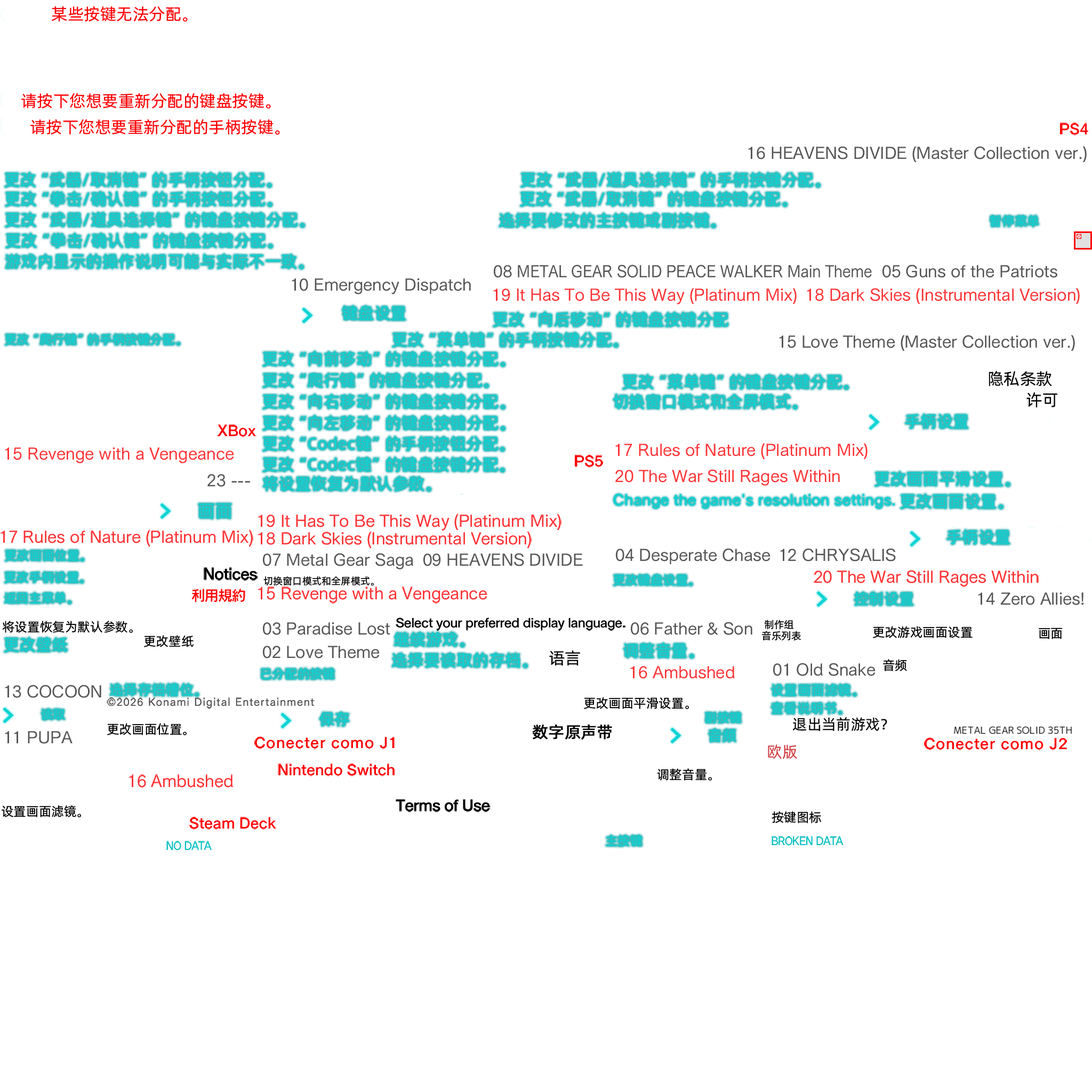
<style>
.page{position:relative;width:1092px;height:1092px;background:#ffffff}
.page>*{position:absolute;margin:0}
.t1{font:16.5px "AlibabaPuHuiTi_3_55_Regular";color:#ff0004}
.t2{font:16.5px "AlibabaPuHuiTi_3_55_Regular";color:#0cd3d4}
.t3{font:16.5px "AlibabaPuHuiTi_3_55_Regular";color:#0cd1ce}
.t4{font:12.8px "AlibabaPuHuiTi_3_55_Regular";color:#0cd3d4}
.t5{font:16.5px "AlibabaPuHuiTi_3_55_Regular";color:#000000}
.t6{font:18.2px "AlibabaPuHuiTi_3_55_Regular";color:#0cd3d4}
.t7{font:9.9px "AlibabaPuHuiTi_3_55_Regular";color:#000000}
.t8{font:15.4px "AlibabaPuHuiTi_3_55_Regular";color:#0cd3d4}
.t9{font:12.8px "AlibabaPuHuiTi_3_55_Regular";color:#000000}
.t10{font:10.2px "AlibabaPuHuiTi_3_55_Regular";color:#000000}
.t11{font:14.3px "AlibabaPuHuiTi_3_55_Regular";color:#0cd3d4}
.t12{font:13.7px "AlibabaPuHuiTi_3_55_Regular";color:#0cd3d4}
.t13{font:13.5px "AlibabaPuHuiTi_3_55_Regular";color:#0cd3d4}
.t14{font:16px "AlibabaPuHuiTi_3_55_Regular";color:#0cd3d4}
.t15{font:16px "AlibabaPuHuiTi_3_55_Regular";color:#000000;font-weight:bold}
.t16{font:14.8px "AlibabaPuHuiTi_3_55_Regular";color:#000000}
.t17{font:15px "AlibabaPuHuiTi_3_55_Regular";color:#0cd3d4}
.t18{font:15.6px "AlibabaPuHuiTi_3_55_Regular";color:#cf3c40}
</style>
<div class="page">
<p class="t1" style="left:52px;top:6px;width:136px;height:16px">某些按键无法分配。</p>
<p class="t1" style="left:21px;top:93px;width:250px;height:16px">请按下您想要重新分配的键盘按键。</p>
<p class="t1" style="left:30px;top:119px;width:250px;height:16px">请按下您想要重新分配的手柄按键。</p>
<p class="t2" style="left:4px;top:172px;width:268px;height:16px">更改“武器/取消键”的手柄按钮分配。</p>
<p class="t2" style="left:520px;top:172px;width:301px;height:16px">更改“武器/道具选择键”的手柄按键分配。</p>
<p class="t2" style="left:5px;top:191px;width:267px;height:16px">更改“拳击/确认键”的手柄按钮分配。</p>
<p class="t2" style="left:520px;top:191px;width:268px;height:16px">更改“武器/取消键”的键盘按键分配。</p>
<p class="t3" style="left:5px;top:212px;width:300px;height:16px">更改“武器/道具选择键”的键盘按键分配。</p>
<p class="t2" style="left:499px;top:212px;width:217px;height:16px">选择要修改的主按键或副按键。</p>
<p class="t4" style="left:990px;top:215px;width:49px;height:12px">暂停菜单</p>
<p class="t2" style="left:5px;top:232px;width:268px;height:16px">更改“拳击/确认键”的键盘按键分配。</p>
<p class="t2" style="left:5px;top:253px;width:299px;height:16px">游戏内显示的操作说明可能与实际不一致。</p>
<p class="t2" style="left:342px;top:305px;width:64px;height:16px">键盘设置</p>
<p class="t2" style="left:493px;top:311px;width:235px;height:16px">更改“向后移动”的键盘按键分配</p>
<p class="t4" style="left:5px;top:333px;width:175px;height:13px">更改“爬行键”的手柄按键分配。</p>
<p class="t2" style="left:392px;top:332px;width:227px;height:16px">更改“菜单键”的手柄按键分配。</p>
<p class="t2" style="left:262px;top:351px;width:243px;height:16px">更改“向前移动”的键盘按键分配。</p>
<p class="t2" style="left:262px;top:372px;width:227px;height:16px">更改“爬行键”的键盘按键分配。</p>
<p class="t2" style="left:622px;top:374px;width:227px;height:16px">更改“菜单键”的键盘按键分配。</p>
<p class="t5" style="left:989px;top:371px;width:63px;height:16px">隐私条款</p>
<p class="t2" style="left:262px;top:393px;width:243px;height:16px">更改“向右移动”的键盘按键分配。</p>
<p class="t2" style="left:613px;top:394px;width:185px;height:15px">切换窗口模式和全屏模式。</p>
<p class="t5" style="left:1026px;top:392px;width:31px;height:16px">许可</p>
<p class="t2" style="left:905px;top:414px;width:64px;height:15px">手柄设置</p>
<p class="t2" style="left:262px;top:415px;width:243px;height:16px">更改“向左移动”的键盘按键分配。</p>
<p class="t2" style="left:262px;top:436px;width:243px;height:16px">更改“Codec键”的手柄按钮分配。</p>
<p class="t2" style="left:262px;top:456px;width:243px;height:16px">更改“Codec键”的键盘按键分配。</p>
<p class="t2" style="left:874px;top:471px;width:136px;height:16px">更改画面平滑设置。</p>
<p class="t2" style="left:263px;top:476px;width:168px;height:16px">将设置恢复为默认参数。</p>
<p class="t2" style="left:900px;top:493px;width:103px;height:16px">更改画面设置。</p>
<p class="t6" style="left:198px;top:503px;width:34px;height:16px">画面</p>
<p class="t2" style="left:946px;top:529px;width:64px;height:16px">手柄设置</p>
<p class="t4" style="left:5px;top:549px;width:79px;height:12px">更改画面位置。</p>
<p class="t4" style="left:4px;top:571px;width:80px;height:12px">更改手柄设置。</p>
<p class="t7" style="left:263px;top:576px;width:111px;height:10px">切换窗口模式和全屏模式。</p>
<p class="t4" style="left:613px;top:574px;width:80px;height:12px">更改键盘设置。</p>
<p class="t4" style="left:4px;top:592px;width:67px;height:12px">返回主菜单。</p>
<p class="t8" style="left:854px;top:591px;width:60px;height:15px">控制设置</p>
<p class="t9" style="left:2px;top:621px;width:131px;height:12px">将设置恢复为默认参数。</p>
<p class="t10" style="left:764px;top:620px;width:30px;height:10px">制作组</p>
<p class="t9" style="left:873px;top:626px;width:100px;height:12px">更改游戏画面设置</p>
<p class="t9" style="left:1039px;top:628px;width:24px;height:11px">画面</p>
<p class="t2" style="left:4px;top:637px;width:64px;height:16px">更改壁纸</p>
<p class="t9" style="left:144px;top:635px;width:50px;height:12px">更改壁纸</p>
<p class="t2" style="left:394px;top:631px;width:71px;height:16px">继续游戏。</p>
<p class="t10" style="left:761px;top:631px;width:40px;height:10px">音乐列表</p>
<p class="t2" style="left:392px;top:652px;width:136px;height:16px">选择要读取的存档。</p>
<p class="t5" style="left:549px;top:650px;width:31px;height:16px">语言</p>
<p class="t2" style="left:623px;top:643px;width:71px;height:15px">调整音量。</p>
<p class="t9" style="left:883px;top:659px;width:24px;height:12px">音频</p>
<p class="t4" style="left:261px;top:668px;width:74px;height:12px">已分配的按键</p>
<p class="t11" style="left:109px;top:683px;width:90px;height:13px">选择存档槽位。</p>
<p class="t12" style="left:771px;top:684px;width:86px;height:12px">设置画面滤镜。</p>
<p class="t9" style="left:584px;top:697px;width:105px;height:12px">更改画面平滑设置。</p>
<p class="t13" style="left:770px;top:702px;width:72px;height:12px">查看说明书。</p>
<p class="t4" style="left:41px;top:708px;width:24px;height:12px">读取</p>
<p class="t14" style="left:319px;top:711px;width:30px;height:16px">保存</p>
<p class="t4" style="left:705px;top:711px;width:37px;height:13px">副按键</p>
<p class="t9" style="left:107px;top:723px;width:80px;height:12px">更改画面位置。</p>
<p class="t15" style="left:532px;top:724px;width:80px;height:16px">数字原声带</p>
<p class="t16" style="left:792px;top:717px;width:95px;height:14px">退出当前游戏？</p>
<p class="t17" style="left:708px;top:728px;width:28px;height:14px">音频</p>
<p class="t18" style="left:768px;top:744px;width:29px;height:15px">欧版</p>
<p class="t9" style="left:657px;top:768px;width:55px;height:13px">调整音量。</p>
<p class="t9" style="left:2px;top:805px;width:79px;height:12px">设置画面滤镜。</p>
<p class="t9" style="left:772px;top:811px;width:49px;height:12px">按键图标</p>
<p class="t4" style="left:606px;top:834px;width:37px;height:13px">主按键</p>
</div>
